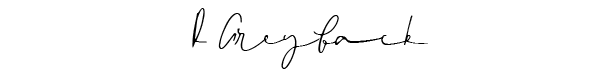
<style>
.page{position:relative;width:600px;height:75px;background:#ffffff}
.page>*{position:absolute;margin:0}
.t1{font:100px "Signed";color:#000000}
</style>
<div class="page">
<p class="t1" style="left:192px;top:8px;width:236px;height:61px">R Greyback</p>
</div>
